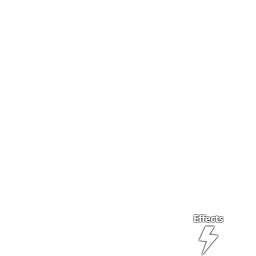
<style>
.page{position:relative;width:256px;height:256px;background:#ffffff}
.page>*{position:absolute;margin:0}
.t1{font:11px "Calibri-Bold";color:#ffffff}
</style>
<div class="page">
<p class="t1" style="left:194px;top:215px;width:30px;height:7px">Effects</p>
</div>
